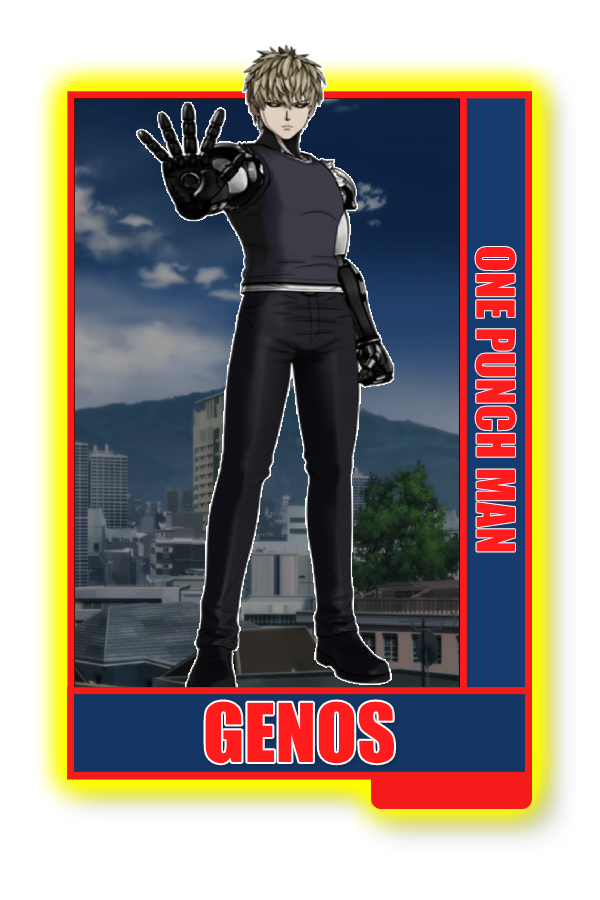
<style>
.page{position:relative;width:600px;height:900px;background:#ffffff}
.page>*{position:absolute;margin:0}
.t1{font:48.8px "Impact";color:#ff1c1c}
.t2{font:75px "Impact";color:#ff1c1c}
</style>
<div class="page">
<p class="t1" style="left:475px;top:246px;width:41px;height:306px;rotate:90deg">ONE PUNCH MAN</p>
<p class="t2" style="left:205px;top:701px;width:190px;height:63px">GENOS</p>
</div>
